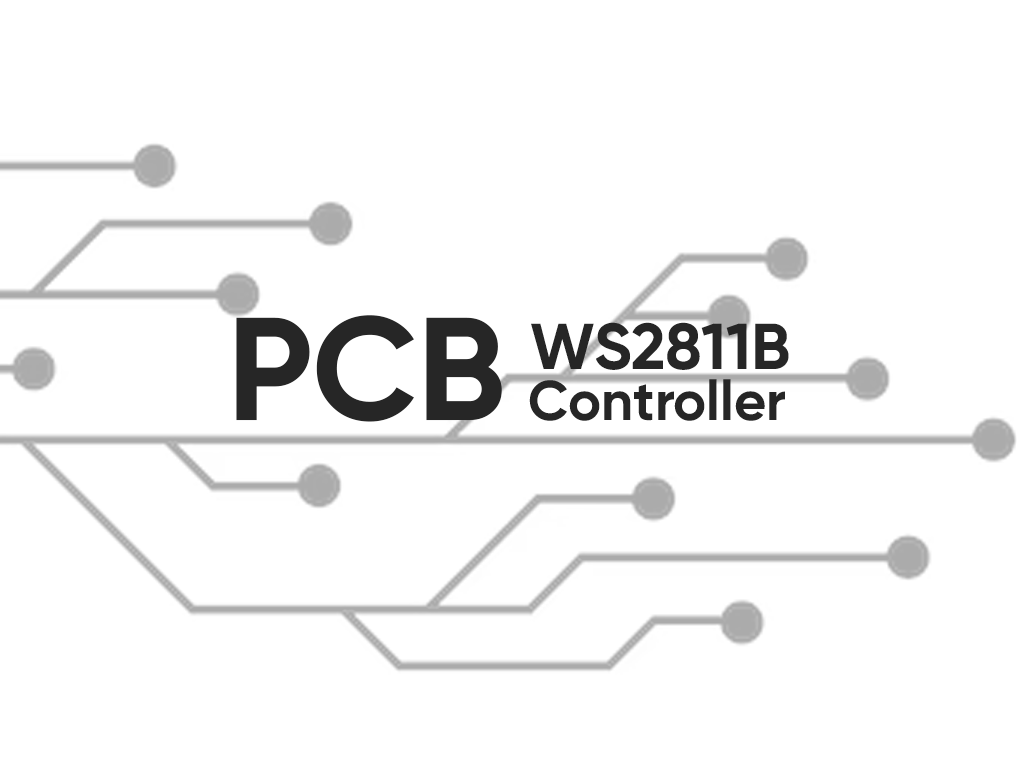
<style>
.page{position:relative;width:1024px;height:768px;background:#ffffff}
.page>*{position:absolute;margin:0}
.t1{font:146px "Gilroy-Bold";color:#262626}
.t2{font:64.7px "Gilroy-Bold";color:#262626}
.t3{font:55.6px "Gilroy-Bold";color:#262626}
</style>
<div class="page">
<p class="t1" style="left:236px;top:315px;width:266px;height:107px">PCB</p>
<p class="t2" style="left:531px;top:322px;width:258px;height:48px">WS2811B</p>
<p class="t3" style="left:529px;top:379px;width:256px;height:42px">Controller</p>
</div>
